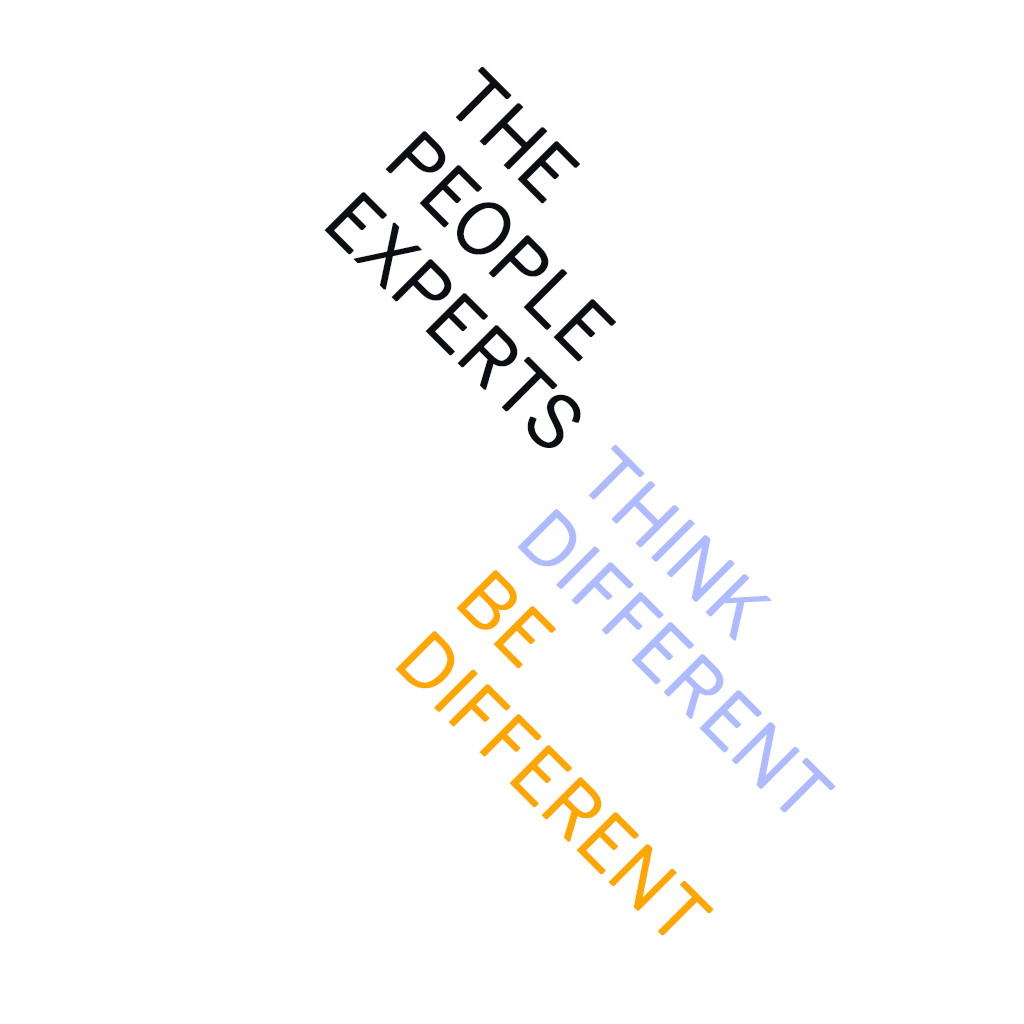
<style>
.page{position:relative;width:1024px;height:1024px;background:#ffffff}
.page>*{position:absolute;margin:0}
.t1{font:72px "BentonSans-Book";color:#0d0e13;text-transform:uppercase;font-weight:bold}
.t2{font:72px "BentonSans-Book";color:#aebcff;text-transform:uppercase;font-weight:bold}
.t3{font:72px "BentonSans-Book";color:#ffa600;text-transform:uppercase;font-weight:bold}
</style>
<div class="page">
<p class="t1" style="left:324px;top:67px;width:292px;height:381px;rotate:45deg">The <br>People<br>Experts</p>
<p class="t2" style="left:395px;top:445px;width:441px;height:491px;rotate:45deg">THINK<br>different<br><span class="t3">be<br>different</span></p>
</div>
